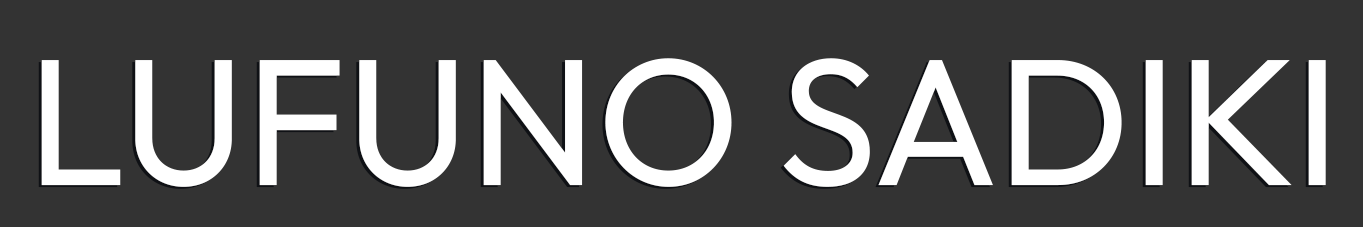
<style>
.page{position:relative;width:1363px;height:227px;background:#333333}
.page>*{position:absolute;margin:0}
.t1{font:180px "Outfit-Regular";color:#ffffff;text-transform:uppercase}
</style>
<div class="page">
<p class="t1" style="left:41px;top:58px;width:1285px;height:129px">lufuno sadiki</p>
</div>
